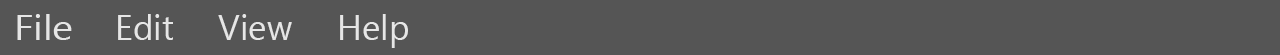
<style>
.page{position:relative;width:1280px;height:55px;background:#555555}
.page>*{position:absolute;margin:0}
.t1{font:35px "SegoeUI";color:#e6e6e6;scale:1.13 1}
.t2{font:35px "SegoeUI";color:#e6e6e6}
</style>
<div class="page">
<p class="t1" style="left:17px;top:14px;width:55px;height:26px">File</p>
<p class="t2" style="left:118px;top:14px;width:55px;height:26px">Edit</p>
<p class="t2" style="left:218px;top:14px;width:74px;height:26px">View</p>
<p class="t2" style="left:340px;top:14px;width:68px;height:34px">Help</p>
</div>
